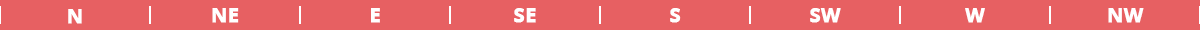
<style>
.page{position:relative;width:1200px;height:30px;background:#e76062}
.page>*{position:absolute;margin:0}
.t1{font:20px "OpenSans-Bold";color:#ffffff;font-weight:bold}
</style>
<div class="page">
<p class="t1" style="left:68px;top:9px;width:14px;height:15px">N</p>
<p class="t1" style="left:212px;top:8px;width:27px;height:15px">NE</p>
<p class="t1" style="left:371px;top:8px;width:9px;height:15px">E</p>
<p class="t1" style="left:514px;top:8px;width:22px;height:15px">SE</p>
<p class="t1" style="left:670px;top:8px;width:11px;height:15px">S</p>
<p class="t1" style="left:810px;top:8px;width:31px;height:15px">SW</p>
<p class="t1" style="left:965px;top:8px;width:20px;height:15px">W</p>
<p class="t1" style="left:1108px;top:8px;width:36px;height:15px">NW</p>
</div>
